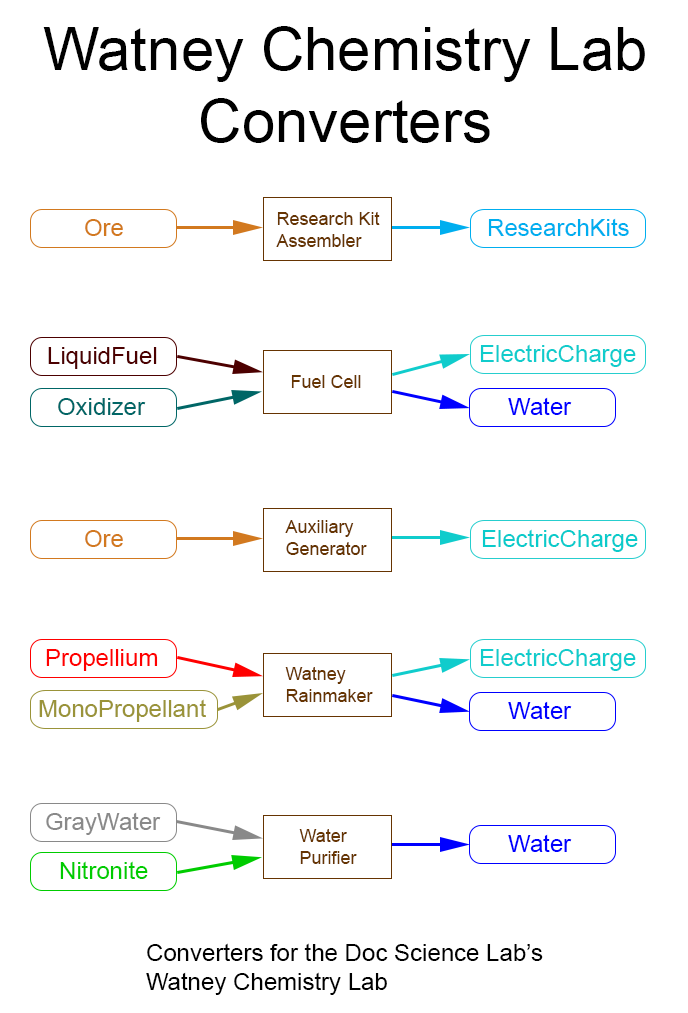
<style>
.page{position:relative;width:688px;height:1013px;background:#ffffff}
.page>*{position:absolute;margin:0}
.t1{font:60px "ArialMT";color:#000000}
.t2{font:24px "ArialMT";color:#d2791f}
.t3{font:18px "ArialMT";color:#663401}
.t4{font:24px "ArialMT";color:#00aeef}
.t5{font:24px "ArialMT";color:#4c0000}
.t6{font:24px "ArialMT";color:#10cccc}
.t7{font:24px "ArialMT";color:#006666}
.t8{font:24px "ArialMT";color:#0000ff}
.t9{font:24px "ArialMT";color:#0acbcb}
.t10{font:24px "ArialMT";color:#ff0000}
.t11{font:24px "ArialMT";color:#9a9339}
.t12{font:24px "ArialMT";color:#898989}
.t13{font:24px "ArialMT";color:#00cc00}
.t14{font:24px "ArialMT";color:#000000}
</style>
<div class="page">
<p class="t1" style="left:43px;top:26px;width:602px;height:117px;text-align:center">Watney Chemistry Lab<br>Converters</p>
<p class="t2" style="left:85px;top:219px;width:38px;height:17px">Ore</p>
<p class="t3" style="left:276px;top:212px;width:104px;height:35px">Research Kit<br>Assembler</p>
<p class="t4" style="left:488px;top:218px;width:141px;height:18px">ResearchKits</p>
<p class="t5" style="left:48px;top:347px;width:109px;height:22px">LiquidFuel</p>
<p class="t6" style="left:480px;top:344px;width:156px;height:23px">ElectricCharge</p>
<p class="t3" style="left:291px;top:375px;width:70px;height:13px">Fuel Cell</p>
<p class="t7" style="left:58px;top:398px;width:88px;height:17px">Oxidizer</p>
<p class="t8" style="left:508px;top:397px;width:64px;height:18px">Water</p>
<p class="t3" style="left:285px;top:520px;width:82px;height:35px">Auxiliary<br>Generator</p>
<p class="t2" style="left:85px;top:530px;width:38px;height:17px">Ore</p>
<p class="t9" style="left:482px;top:529px;width:156px;height:23px">ElectricCharge</p>
<p class="t10" style="left:46px;top:649px;width:112px;height:22px">Propellium</p>
<p class="t6" style="left:480px;top:648px;width:156px;height:23px">ElectricCharge</p>
<p class="t3" style="left:285px;top:667px;width:88px;height:35px">Watney<br>Rainmaker</p>
<p class="t11" style="left:39px;top:699px;width:167px;height:23px">MonoPropellant</p>
<p class="t8" style="left:508px;top:701px;width:64px;height:18px">Water</p>
<p class="t12" style="left:46px;top:812px;width:115px;height:23px">GrayWater</p>
<p class="t3" style="left:299px;top:829px;width:58px;height:35px">Water<br>Purifier</p>
<p class="t8" style="left:508px;top:834px;width:64px;height:18px">Water</p>
<p class="t13" style="left:60px;top:861px;width:88px;height:18px">Nitronite</p>
<p class="t14" style="left:146px;top:943px;width:397px;height:52px">Converters for the Doc Science Lab’s<br>Watney Chemistry Lab</p>
</div>
